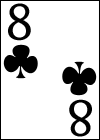
<style>
.page{position:relative;width:100px;height:140px;background:#ffffff}
.page>*{position:absolute;margin:0}
.t1{font:60px "HighTowerText-Reg";color:#000000}
</style>
<div class="page">
<p class="t1" style="left:8px;top:3px;width:23px;height:38px">8</p>
<p class="t1" style="left:69px;top:99px;width:23px;height:38px;rotate:180deg">8</p>
</div>
